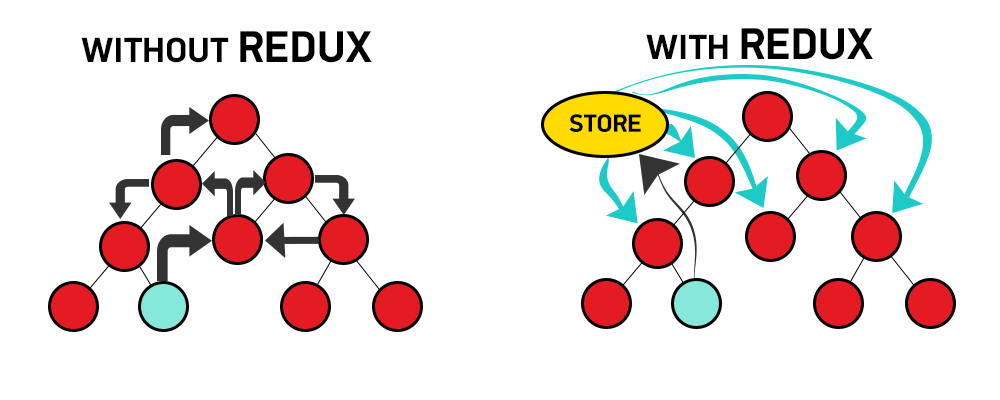
<style>
.page{position:relative;width:1000px;height:400px;background:#ffffff}
.page>*{position:absolute;margin:0}
.t1{font:44.4px "PFDinDisplayPro-Bold";color:#000000}
.t2{font:35.2px "PFDinDisplayPro-Bold";color:#000000}
.t3{font:25px "PFDinDisplayPro-Bold";color:#000000}
</style>
<div class="page">
<p class="t1" style="left:646px;top:28px;width:227px;height:32px"><span class="t2">WITH </span>REDUX</p>
<p class="t2" style="left:81px;top:31px;width:291px;height:32px">WITHOUT <span class="t1">REDUX</span></p>
<p class="t3" style="left:569px;top:114px;width:72px;height:18px">STORE</p>
</div>
